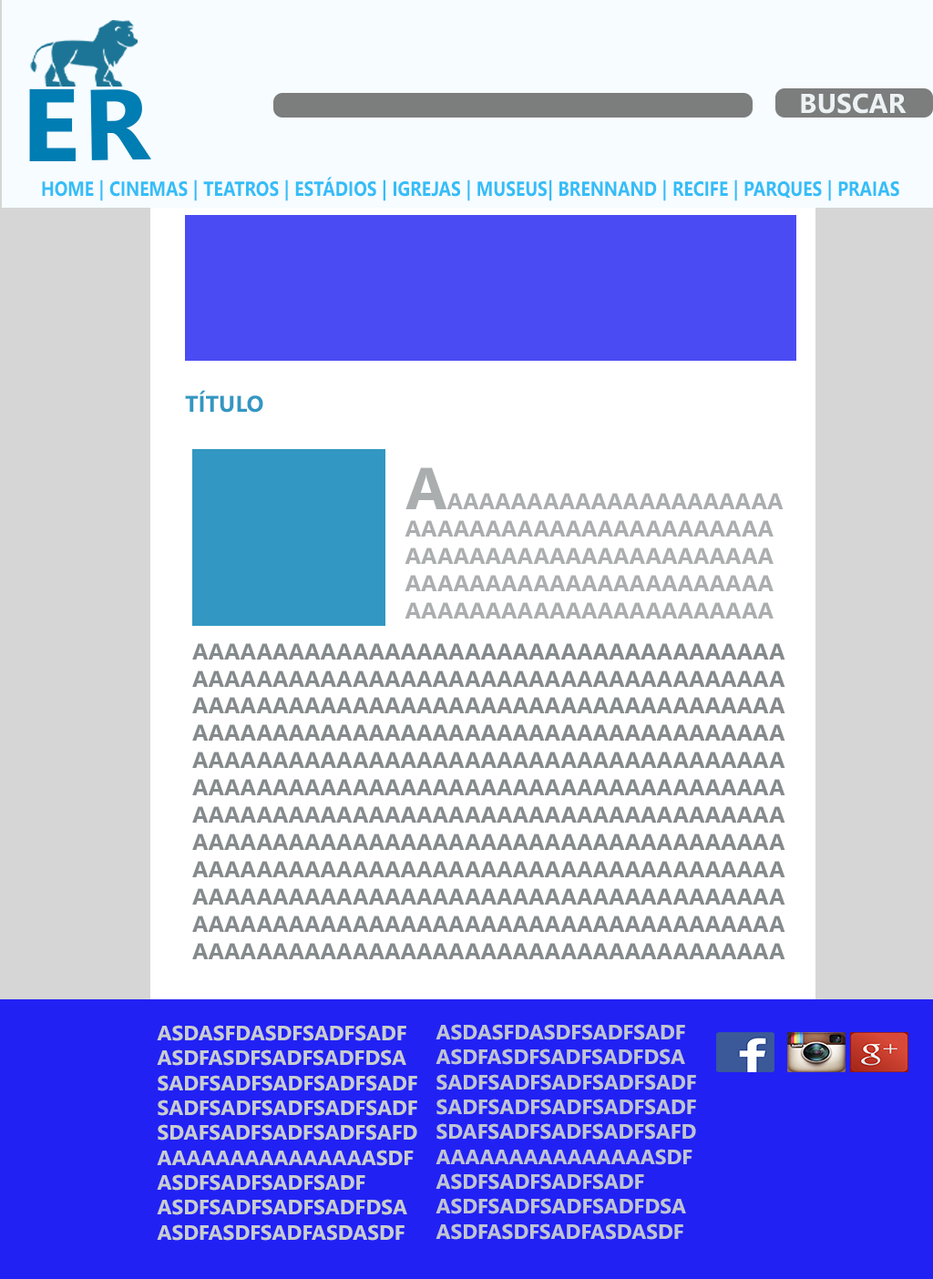
<style>
.page{position:relative;width:933px;height:1279px;background:#ffffff}
.page>*{position:absolute;margin:0}
.t1{font:20.5px "SegoeWP-Bold";color:#35bdf8;scale:0.86 1}
.t2{font:22.8px "SegoeWP-Bold";color:#3297c2}
.t3{font:22.8px "SegoeWP-Bold";color:#abaeaf}
.t4{font:59.2px "SegoeWP-Bold";color:#abaeaf}
.t5{font:22.8px "SegoeWP-Bold";color:#858a8c}
.t6{font:20.7px "SegoeWP-Bold";color:#c9cdce}
.t7{font:20.7px "SegoeWP-Bold";color:#c0c4d1}
</style>
<div class="page">
<p class="t1" style="left:42px;top:177px;width:857px;height:24px">HOME | CINEMAS | TEATROS | ESTÁDIOS | IGREJAS | MUSEUS| BRENNAND | RECIFE | PARQUES | PRAIAS</p>
<p class="t2" style="left:185px;top:390px;width:78px;height:23px">TÍTULO</p>
<p class="t3" style="left:404px;top:467px;width:379px;height:151px"><span class="t4">A</span>AAAAAAAAAAAAAAAAAAAAAAAAAAAAAAAAAAAAAAAAAAAAAAAAAAAAAAAAAAAAAAAAAAAAAAAAAAAAAAAAAAAAAAAAAAAAAAAAAAAAAAAAAAAAAAAAAAAAAAAAAAAAAAAAAAAAAAAAA</p>
<p class="t5" style="left:192px;top:643px;width:593px;height:316px">AAAAAAAAAAAAAAAAAAAAAAAAAAAAAAAAAAAAAAAAAAAAAAAAAAAAAAAAAAAAAAAAAAAAAAAAAAAAAAAAAAAAAAAAAAAAAAAAAAAAAAAAAAAAAAAAAAAAAAAAAAAAAAAAAAAAAAAAAAAAAAAAAAAAAAAAAAAAAAAAAAAAAAAAAAAAAAAAAAAAAAAAAAAAAAAAAAAAAAAAAAAAAAAAAAAAAAAAAAAAAAAAAAAAAAAAAAAAAAAAAAAAAAAAAAAAAAAAAAAAAAAAAAAAAAAAAAAAAAAAAAAAAAAAAAAAAAAAAAAAAAAAAAAAAAAAAAAAAAAAAAAAAAAAAAAAAAAAAAAAAAAAAAAAAAAAAAAAAAAAAAAAAAAAAAAAAAAAAAAAAAAAAAAAAAAAAAAAAAAAAAAAAAAAAAAAAAAAAAAAAAAAAAAAAAAAAAAAAAAAAAAAAAAAAAAAAAAAAAAAAAAAAAAAAAAAAAAAAAAAAAAAAAAAAA</p>
<p class="t6" style="left:157px;top:1025px;width:260px;height:215px">ASDASFDASDFSADFSADF<br>ASDFASDFSADFSADFDSA<br>SADFSADFSADFSADFSADF<br>SADFSADFSADFSADFSADF<br>SDAFSADFSADFSADFSAFD<br>AAAAAAAAAAAAAAASDF<br>ASDFSADFSADFSADF<br>ASDFSADFSADFSADFDSA<br>ASDFASDFSADFASDASDF</p>
<p class="t7" style="left:435px;top:1024px;width:261px;height:215px">ASDASFDASDFSADFSADF<br>ASDFASDFSADFSADFDSA<br>SADFSADFSADFSADFSADF<br>SADFSADFSADFSADFSADF<br>SDAFSADFSADFSADFSAFD<br>AAAAAAAAAAAAAAASDF<br>ASDFSADFSADFSADF<br>ASDFSADFSADFSADFDSA<br>ASDFASDFSADFASDASDF</p>
</div>
